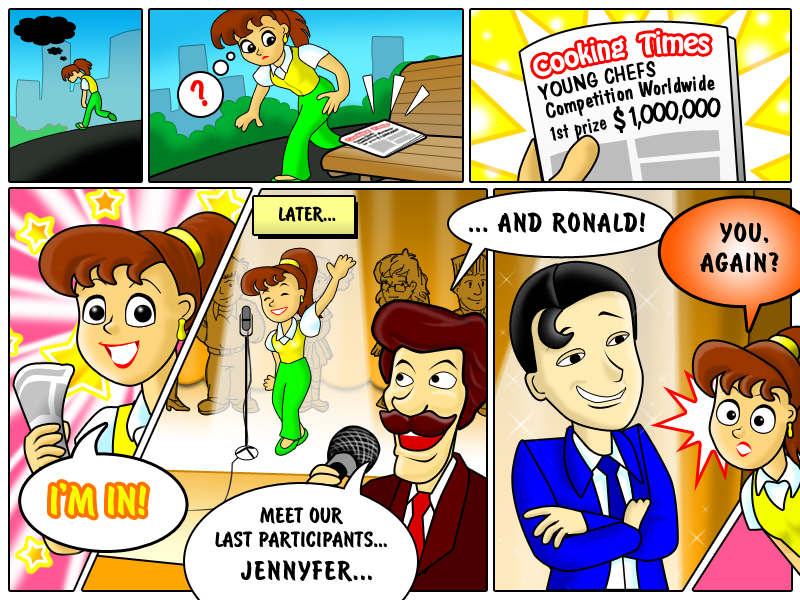
<style>
.page{position:relative;width:800px;height:600px}
.page>*{position:absolute;margin:0}
.t1{font:22px "BrushType-Bold";letter-spacing:0.01em;color:#000000}
.t2{font:30px "BrushType-Bold";letter-spacing:0.05em;color:#000000}
.t3{font:30px/30px "BrushType-Bold";letter-spacing:0.05em;color:#000000}
.t4{font:45px "BrushType-Bold";letter-spacing:-0.005em;color:#f6ff00;text-transform:uppercase}
.t5{font:24px/24px "BrushType-Bold";letter-spacing:0.01em;color:#000000}
.t6{font:30px "BrushType-Bold";letter-spacing:0.05em;color:#000000;text-transform:uppercase}
</style>
<div class="page">
<p class="t1" style="left:279px;top:206px;width:57px;height:16px">LATER...</p>
<p class="t2" style="left:469px;top:212px;width:176px;height:22px">... AND RONALD!</p>
<p class="t3" style="left:700px;top:222px;width:79px;height:51px;text-align:center">YOU,<br>AGAIN?</p>
<p class="t4" style="left:51px;top:483px;width:96px;height:34px">I'm in!</p>
<p class="t5" style="left:215px;top:507px;width:172px;height:42px;text-align:center">MEET OUR<br>LAST PARTICIPANTS...</p>
<p class="t6" style="left:241px;top:560px;width:131px;height:22px">Jennyfer...</p>
</div>
